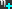
<style>
.page{position:relative;width:12px;height:9px;background:#333333}
.page>*{position:absolute;margin:0}
.t1{font:10px "Cambria-Bold";color:#fcfcfc}
</style>
<div class="page">
<p class="t1" style="left:0px;top:0px;width:6px;height:7px">η</p>
</div>
